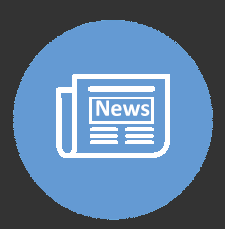
<style>
.page{position:relative;width:225px;height:229px;background:#649ad3}
.page>*{position:absolute;margin:0}
.t1{font:24px "Calibri-Bold";color:#ffffff}
</style>
<div class="page">
<p class="t1" style="left:96px;top:100px;width:54px;height:16px">News</p>
</div>
